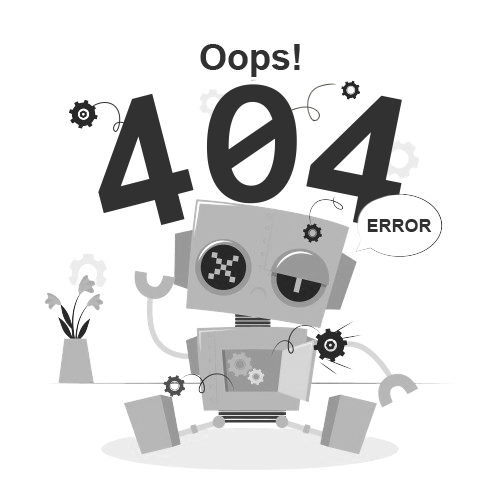
<style>
.page{position:relative;width:500px;height:500px;background:#ffffff}
.page>*{position:absolute;margin:0}
.t1{font:36px "Arial-BoldMT";color:#313131}
.t2{font:180px "Consolas-Bold";color:#313131}
.t3{font:180px "Arial-BoldMT";color:#313131}
.t4{font:18px "Arial-BoldMT";color:#313131}
</style>
<div class="page">
<p class="t1" style="left:200px;top:44px;width:100px;height:33px">Oops!</p>
<p class="t2" style="left:206px;top:84px;width:91px;height:120px;rotate:1deg">09</p>
<p class="t3" style="left:98px;top:93px;width:96px;height:133px;rotate:-14deg">4</p>
<p class="t4" style="left:367px;top:219px;width:65px;height:13px">ERROR</p>
</div>
